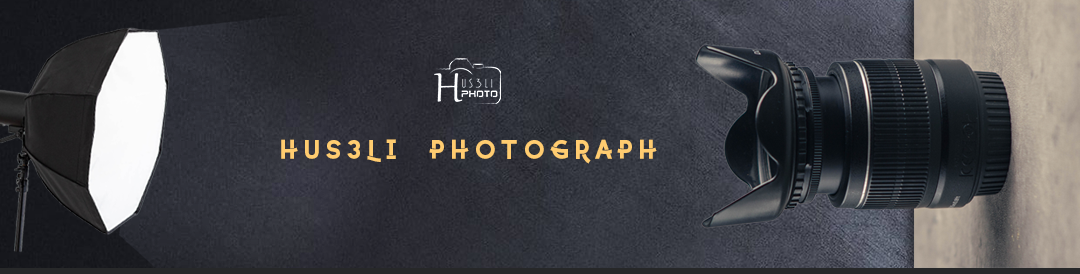
<style>
.page{position:relative;width:1080px;height:274px}
.page>*{position:absolute;margin:0}
.t1{font:27.1px "Coyote-SemiBoldDEMO";color:#ffcc70}
</style>
<div class="page">
<p class="t1" style="left:281px;top:139px;width:376px;height:25px">HUS3LI  PHOTOGRAPH</p>
</div>
